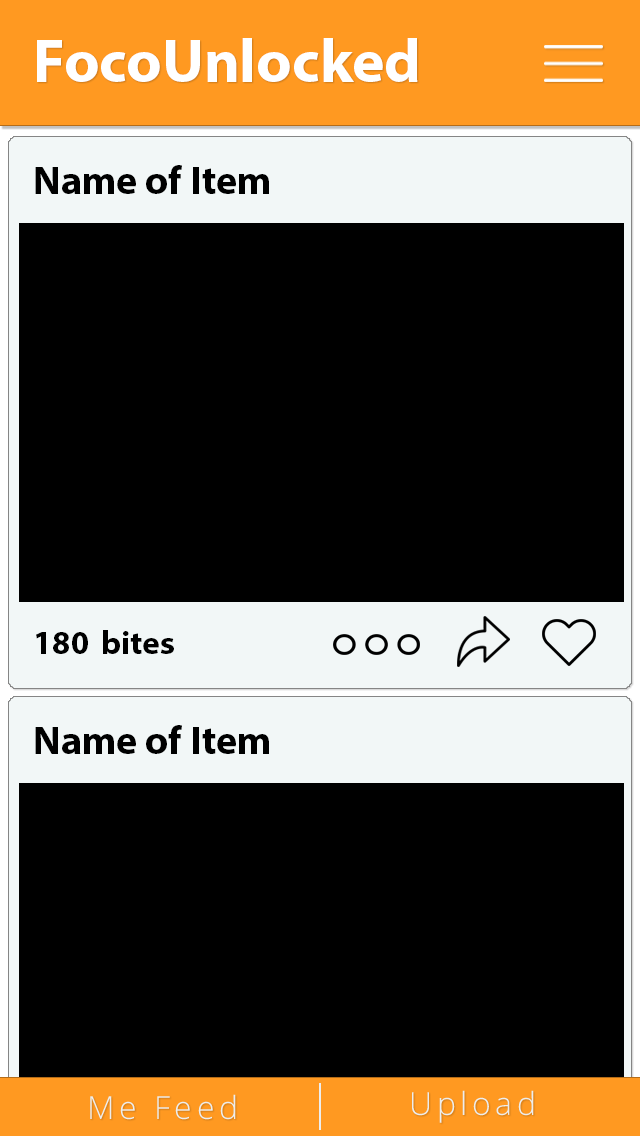
<style>
.page{position:relative;width:640px;height:1136px;background:#000000}
.page>*{position:absolute;margin:0}
.t1{font:61.3px "MyriadHebrew-Bold";color:#ffffff}
.t2{font:40px "MyriadHebrew-Bold";color:#000000}
.t3{font:33.2px "MyriadHebrew-Bold";color:#000000}
.t4{font:32px "OpenSans-Light";letter-spacing:0.14em;color:#ededed}
</style>
<div class="page">
<p class="t1" style="left:37px;top:38px;width:381px;height:44px">FocoUnlocked</p>
<p class="t2" style="left:35px;top:165px;width:234px;height:29px">Name of Item</p>
<p class="t3" style="left:103px;top:630px;width:71px;height:24px">bites</p>
<p class="t3" style="left:36px;top:632px;width:52px;height:22px">180</p>
<p class="t2" style="left:35px;top:725px;width:234px;height:29px">Name of Item</p>
<p class="t4" style="left:90px;top:1094px;width:146px;height:26px">Me Feed</p>
<p class="t4" style="left:412px;top:1090px;width:122px;height:33px">Upload</p>
</div>
